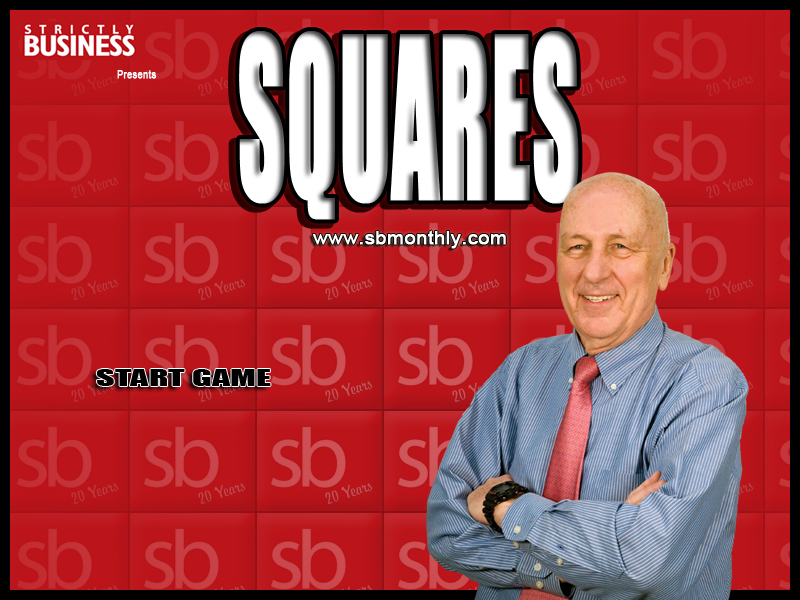
<style>
.page{position:relative;width:800px;height:600px}
.page>*{position:absolute;margin:0}
.t1{font:207.3px "Impact";color:#ffffff;font-weight:bold;scale:0.44 1}
.t2{font:11.3px "ArialMT";color:#ffffff;font-weight:bold;scale:0.83 1}
.t3{font:17.8px "ArialMT";color:#ffffff;font-weight:bold;scale:1.14 1}
.t4{font:21.6px "Impact";color:#000000;scale:1.69 1}
</style>
<div class="page">
<p class="t1" style="left:239px;top:31px;width:340px;height:189px">SQUARES</p>
<p class="t2" style="left:117px;top:70px;width:40px;height:9px">Presents</p>
<p class="t3" style="left:312px;top:230px;width:194px;height:19px">www.sbmonthly.com</p>
<p class="t4" style="left:96px;top:369px;width:175px;height:17px">START GAME</p>
</div>
